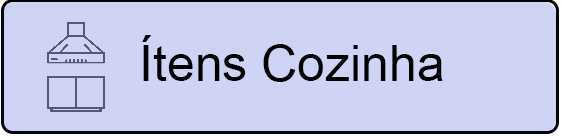
<style>
.page{position:relative;width:562px;height:136px;background:#cfd3f4}
.page>*{position:absolute;margin:0}
.t1{font:50px "ArialMT";color:#000000}
</style>
<div class="page">
<p class="t1" style="left:142px;top:35px;width:301px;height:47px">Ítens Cozinha</p>
</div>
